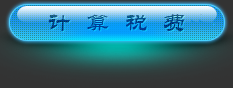
<style>
.page{position:relative;width:233px;height:88px}
.page>*{position:absolute;margin:0}
.t1{font:24px "STLiti";letter-spacing:0.6em}
</style>
<div class="page">
<p class="t1" style="left:48px;top:14px;width:137px;height:18px">计算税费</p>
</div>
